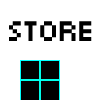
<style>
.page{position:relative;width:100px;height:100px;background:#ffffff}
.page>*{position:absolute;margin:0}
.t1{font:40px "MunroSmall";color:#000000}
</style>
<div class="page">
<p class="t1" style="left:9px;top:21px;width:83px;height:20px">STORE</p>
</div>
